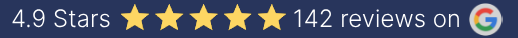
<style>
.page{position:relative;width:518px;height:38px;background:#28355c}
.page>*{position:absolute;margin:0}
.t1{font:24px "Inter-Light";color:#ffffff}
</style>
<div class="page">
<p class="t1" style="left:12px;top:9px;width:98px;height:19px">4.9 Stars</p>
<p class="t1" style="left:294px;top:9px;width:165px;height:19px">142 reviews on</p>
</div>
